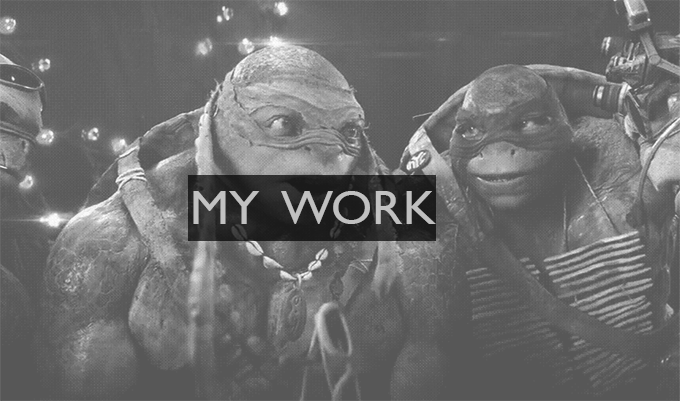
<style>
.page{position:relative;width:680px;height:401px}
.page>*{position:absolute;margin:0}
.t1{font:48px "GillSans";color:#c0c0c0;scale:1.05 1}
</style>
<div class="page">
<p class="t1" style="left:193px;top:191px;width:243px;height:33px">MY  WORK</p>
</div>
